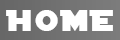
<style>
.page{position:relative;width:120px;height:40px;background:#ffffff}
.page>*{position:absolute;margin:0}
.t1{font:31px "SFDistantGalaxyAlternate";letter-spacing:0.12em;color:#ffffff}
</style>
<div class="page">
<p class="t1" style="left:6px;top:10px;width:107px;height:21px">HOME</p>
</div>
